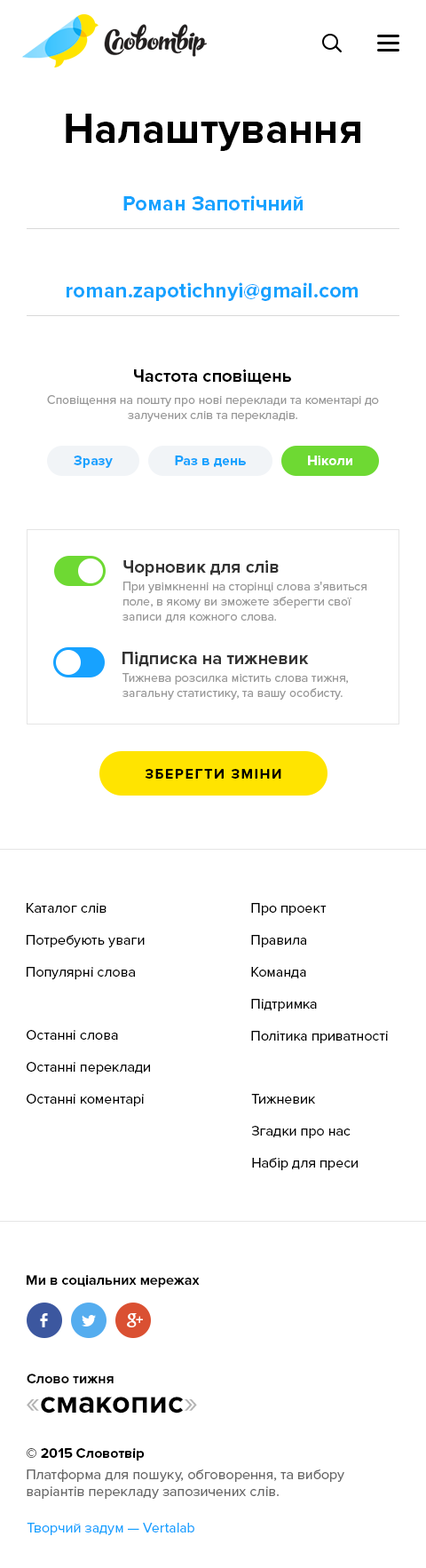
<style>
.page{position:relative;width:426px;height:1568px;background:#ffffff}
.page>*{position:absolute;margin:0}
.t1{font:42.6px "ProximaNova-Bold";color:#000000}
.t2{font:21.3px "ProximaNova-Bold";color:#17a2ff}
.t3{font:17.8px "ProximaNova-Bold";color:#000000}
.t4{font:12.4px "ProximaNova-Regular";color:#999999}
.t5{font:14.2px "ProximaNova-Bold";color:#17a2ff}
.t6{font:14.2px "ProximaNova-Bold";color:#ffffff}
.t7{font:17.8px "ProximaNova-Bold";color:#333333}
.t8{font:14.2px "ProximaNova-Bold";letter-spacing:0.1em;color:#000000;text-transform:uppercase}
.t9{font:14.2px/32px "ProximaNova-Regular";color:#000000}
.t10{font:14.2px/32px "ProximaNova-Regular";color:#010101}
.t11{font:14.2px "ProximaNova-Bold";color:#010101}
.t12{font:32px "ProximaNova-Bold";color:#000000}
.t13{font:32px "ProximaNova-Regular";color:#b3b3b3}
.t14{font:14.2px "ProximaNova-Regular";color:#666666}
.t15{font:14.2px/19.5px "ProximaNova-Bold";color:#000000}
.t16{font:14.2px/21.3px "ProximaNova-Regular";color:#666666}
.t17{font:14.2px "ProximaNova-Regular";color:#17a2ff}
</style>
<div class="page">
<p class="t1" style="left:66px;top:114px;width:294px;height:37px">Налаштування</p>
<p class="t2" style="left:123px;top:195px;width:180px;height:15px">Роман Запотічний</p>
<p class="t2" style="left:67px;top:282px;width:291px;height:19px">roman.zapotichnyi@gmail.com</p>
<p class="t3" style="left:134px;top:369px;width:157px;height:15px">Частота сповіщень</p>
<p class="t4" style="left:47px;top:395px;width:332px;height:27px;text-align:center">Сповіщення на пошту про нові переклади та коментарі до<br>залучених слів та перекладів.</p>
<p class="t5" style="left:74px;top:455px;width:39px;height:13px">Зразу</p>
<p class="t5" style="left:175px;top:455px;width:71px;height:12px">Раз в день</p>
<p class="t6" style="left:308px;top:455px;width:44px;height:10px">Ніколи</p>
<p class="t7" style="left:123px;top:560px;width:156px;height:16px">Чорновик для слів</p>
<p class="t4" style="left:123px;top:582px;width:244px;height:40px">При увімкненні на сторінці слова з'явиться поле, в якому ви зможете зберегти свої<br>записи для кожного слова.</p>
<p class="t7" style="left:123px;top:652px;width:186px;height:15px">Підписка на тижневик</p>
<p class="t4" style="left:123px;top:673px;width:225px;height:27px">Тижнева розсилка містить слова тижня, загальну статистику, та вашу особисту.</p>
<p class="t8" style="left:145px;top:769px;width:136px;height:10px">Зберегти зміни</p>
<p class="t9" style="left:27px;top:903px;width:118px;height:76px">Каталог слів<br>Потребують уваги<br>Популярні слова</p>
<p class="t9" style="left:251px;top:903px;width:137px;height:140px">Про проект<br>Правила<br>Команда<br>Підтримка<br>Політика приватності</p>
<p class="t9" style="left:27px;top:1030px;width:123px;height:76px">Останні слова<br>Останні переклади<br>Останні коментарі</p>
<p class="t10" style="left:251px;top:1094px;width:107px;height:76px">Тижневик<br>Згадки про нас<br>Набір для преси</p>
<p class="t11" style="left:27px;top:1275px;width:173px;height:12px">Ми в соціальних мережах</p>
<p class="t11" style="left:27px;top:1374px;width:87px;height:9px">Слово тижня</p>
<p class="t12" style="left:27px;top:1397px;width:170px;height:17px"><span class="t13">«</span>смакопис<span class="t13">»</span></p>
<p class="t14" style="left:27px;top:1448px;width:317px;height:51px"><span class="t15">© 2015 Словотвір<br></span><span class="t16">Платформа для пошуку, обговорення, </span>та вибору<br>варіантів перекладу запозичених слів.</p>
<p class="t17" style="left:27px;top:1523px;width:167px;height:12px">Творчий задум — Vertalab</p>
</div>
